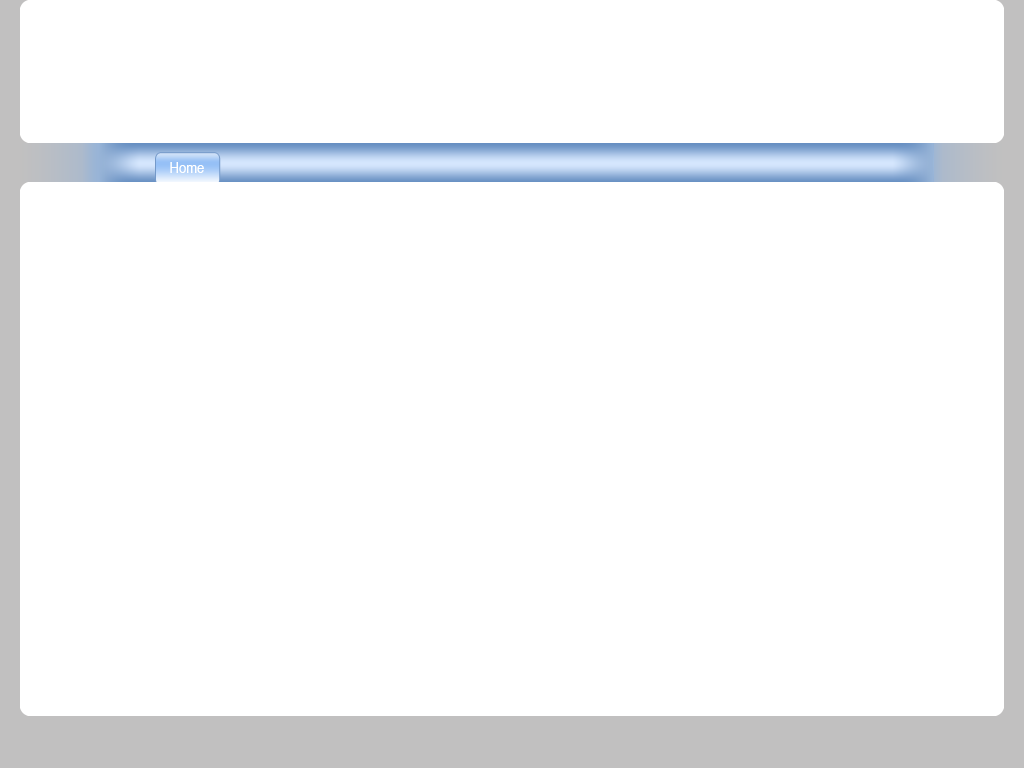
<style>
.page{position:relative;width:1024px;height:768px;background:#ffffff}
.page>*{position:absolute;margin:0}
.t1{font:15.9px "ArialNarrow";color:#ffffff}
</style>
<div class="page">
<p class="t1" style="left:170px;top:162px;width:34px;height:11px">Home</p>
</div>
